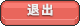
<style>
.page{position:relative;width:80px;height:26px;background:#e9665c}
.page>*{position:absolute;margin:0}
.t1{font:12.5px "SourceHanSansCN-Bold";letter-spacing:0.12em;color:#f1f1f1}
</style>
<div class="page">
<p class="t1" style="left:27px;top:3px;width:26px;height:13px">退出</p>
</div>
